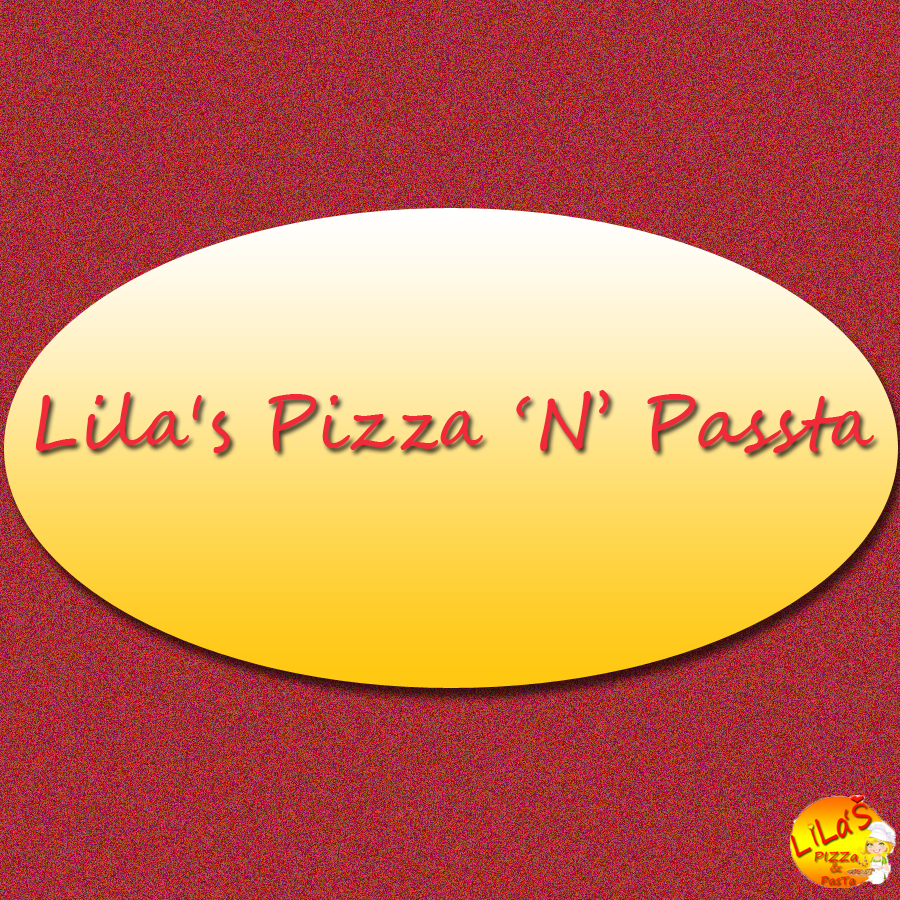
<style>
.page{position:relative;width:900px;height:900px}
.page>*{position:absolute;margin:0}
.t1{font:72px "SegoeScript";color:#f12938}
</style>
<div class="page">
<p class="t1" style="left:36px;top:390px;width:838px;height:63px">Lila's Pizza ‘N’ Passta</p>
</div>
